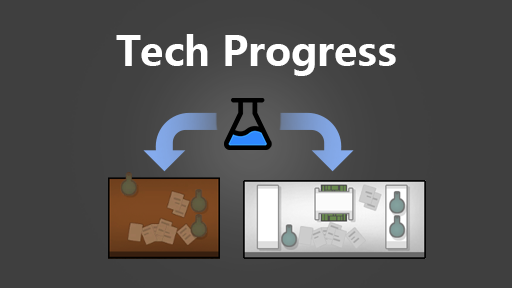
<style>
.page{position:relative;width:512px;height:288px;background:#3f3f3f}
.page>*{position:absolute;margin:0}
.t1{font:39.8px "MicrosoftYaHei-Bold";color:#ffffff}
</style>
<div class="page">
<p class="t1" style="left:116px;top:34px;width:280px;height:42px">Tech Progress</p>
</div>
